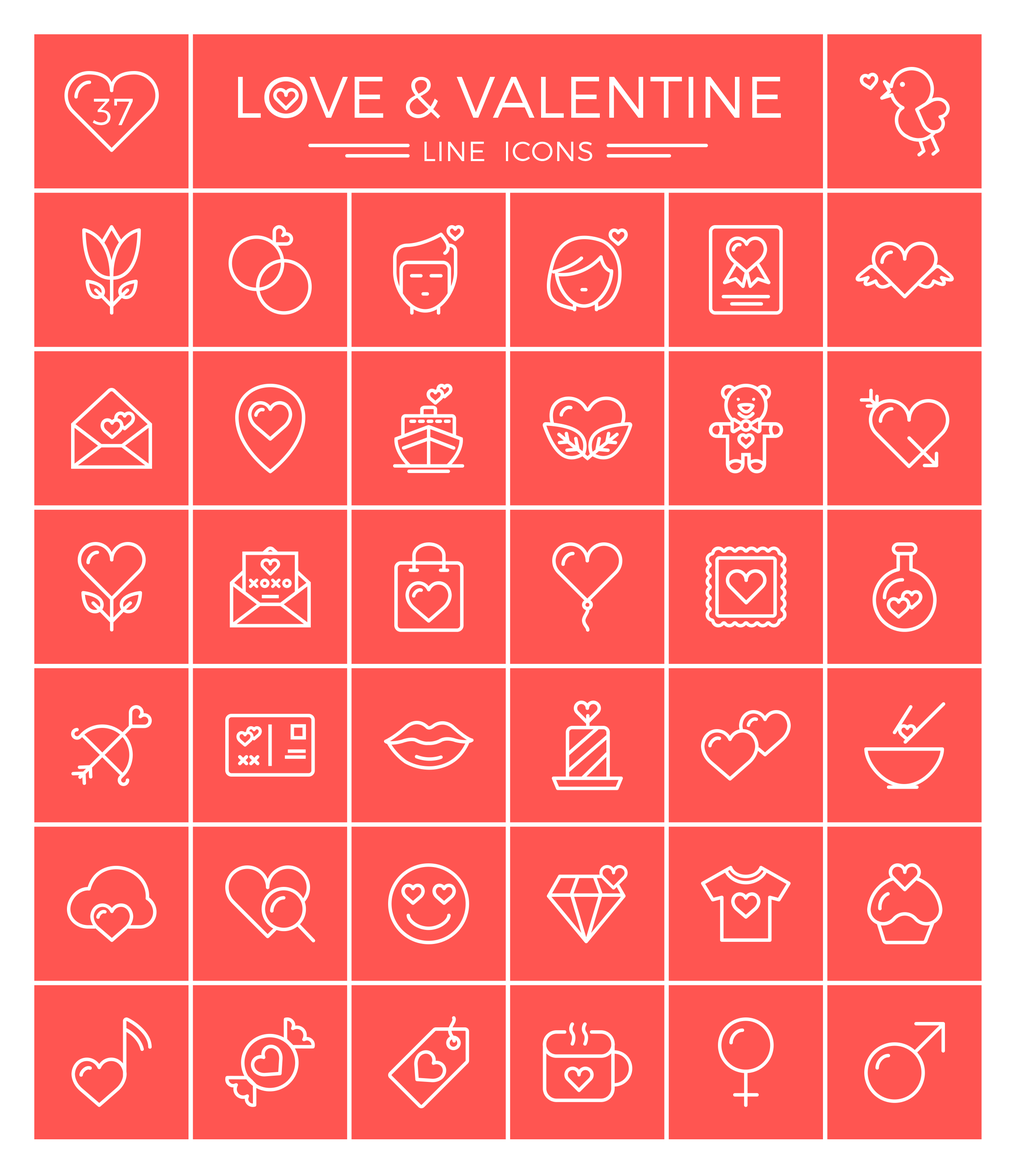
<style>
.page{position:relative;width:1016px;height:1174px;background:#ff5551}
.page>*{position:absolute;margin:0}
.t1{font:58.5px "Montserrat-Light";color:#ffffff}
.t2{font:37.9px "Montserrat-Light";color:#ffffff}
.t3{font:27.5px "Montserrat-Light";letter-spacing:0.025em;color:#ffffff}
</style>
<div class="page">
<p class="t1" style="left:238px;top:76px;width:543px;height:43px">LOVE &amp; VALENTINE</p>
<p class="t2" style="left:93px;top:99px;width:40px;height:26px">37</p>
<p class="t3" style="left:424px;top:142px;width:168px;height:19px">LINE  ICONS</p>
</div>
